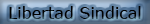
<style>
.page{position:relative;width:150px;height:24px}
.page>*{position:absolute;margin:0}
.t1{font:16px "Verdana";color:#000000}
</style>
<div class="page">
<p class="t1" style="left:9px;top:6px;width:132px;height:13px">Libertad Sindical</p>
</div>
